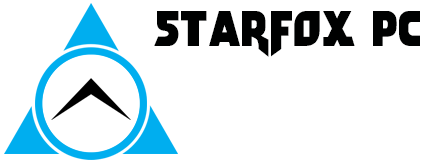
<style>
.page{position:relative;width:432px;height:163px;background:#ffffff}
.page>*{position:absolute;margin:0}
.t1{font:50px "Arwing";color:#000101}
</style>
<div class="page">
<p class="t1" style="left:154px;top:11px;width:266px;height:46px">StarFox PC</p>
</div>
